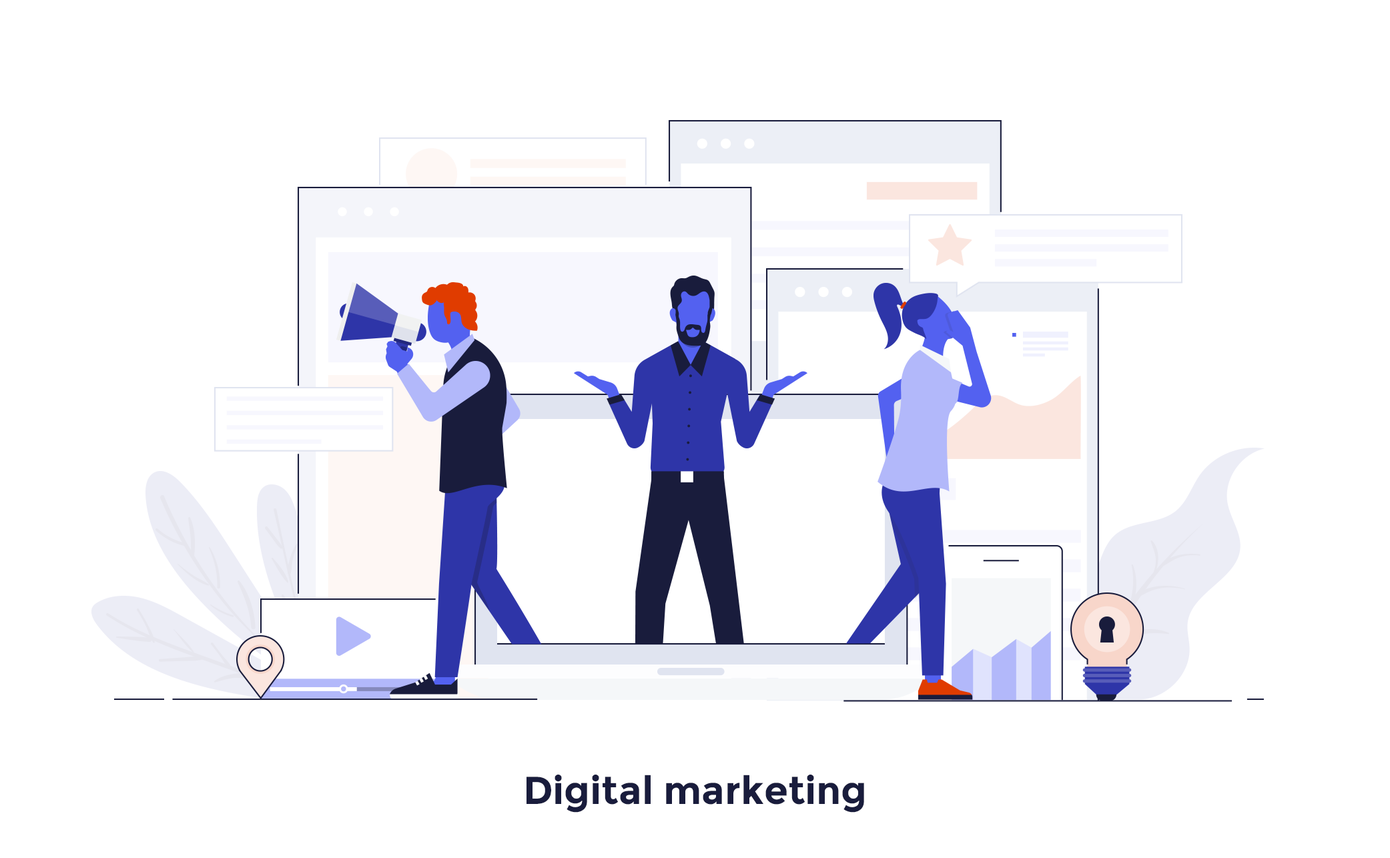
<style>
.page{position:relative;width:1390px;height:858px;background:#ffffff}
.page>*{position:absolute;margin:0}
.t1{font:38.9px "Montserrat-Bold";color:#191c3c}
</style>
<div class="page">
<p class="t1" style="left:526px;top:775px;width:338px;height:38px">Digital marketing</p>
</div>
